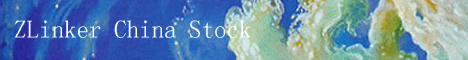
<style>
.page{position:relative;width:468px;height:60px}
.page>*{position:absolute;margin:0}
.t1{font:25px "Á¥Êé-Regular";color:#ffffff}
</style>
<div class="page">
<p class="t1" style="left:14px;top:20px;width:237px;height:18px">ZLinker China Stock</p>
</div>
